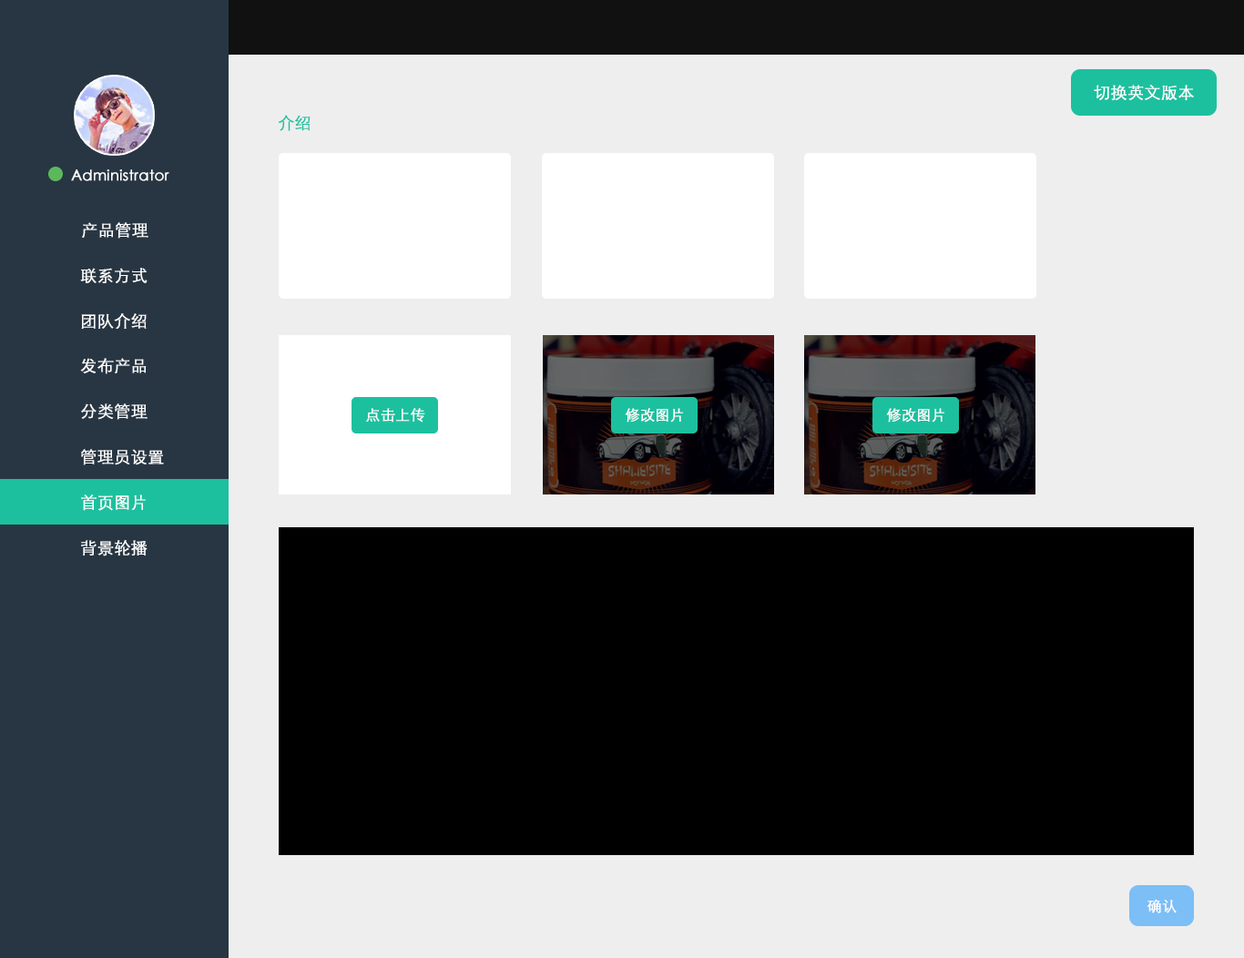
<style>
.page{position:relative;width:1244px;height:958px;background:#eeeeee}
.page>*{position:absolute;margin:0}
.t1{font:16.4px "STXihei";color:#ffffff;font-weight:bold}
.t2{font:16.4px "STXihei";color:#1cc09f;font-weight:bold}
.t3{font:14.6px "STXihei";color:#ffffff;font-weight:bold}
.t4{font:14.6px "STXihei";color:#fefefe;font-weight:bold}
</style>
<div class="page">
<p class="t1" style="left:1094px;top:85px;width:100px;height:15px">切换英文版本</p>
<p class="t2" style="left:278px;top:115px;width:33px;height:16px">介绍</p>
<p class="t3" style="left:71px;top:169px;width:98px;height:12px">Administrator</p>
<p class="t1" style="left:82px;top:222px;width:66px;height:17px">产品管理</p>
<p class="t1" style="left:80px;top:268px;width:68px;height:15px">联系方式</p>
<p class="t1" style="left:81px;top:313px;width:66px;height:16px">团队介绍</p>
<p class="t1" style="left:80px;top:358px;width:67px;height:16px">发布产品</p>
<p class="t1" style="left:81px;top:404px;width:67px;height:16px">分类管理</p>
<p class="t4" style="left:366px;top:408px;width:59px;height:15px">点击上传</p>
<p class="t4" style="left:625px;top:408px;width:58px;height:15px">修改图片</p>
<p class="t4" style="left:886px;top:408px;width:59px;height:15px">修改图片</p>
<p class="t1" style="left:81px;top:449px;width:83px;height:16px">管理员设置</p>
<p class="t1" style="left:81px;top:495px;width:65px;height:16px">首页图片</p>
<p class="t1" style="left:81px;top:540px;width:67px;height:17px">背景轮播</p>
<p class="t3" style="left:1148px;top:899px;width:29px;height:15px">确认</p>
</div>
